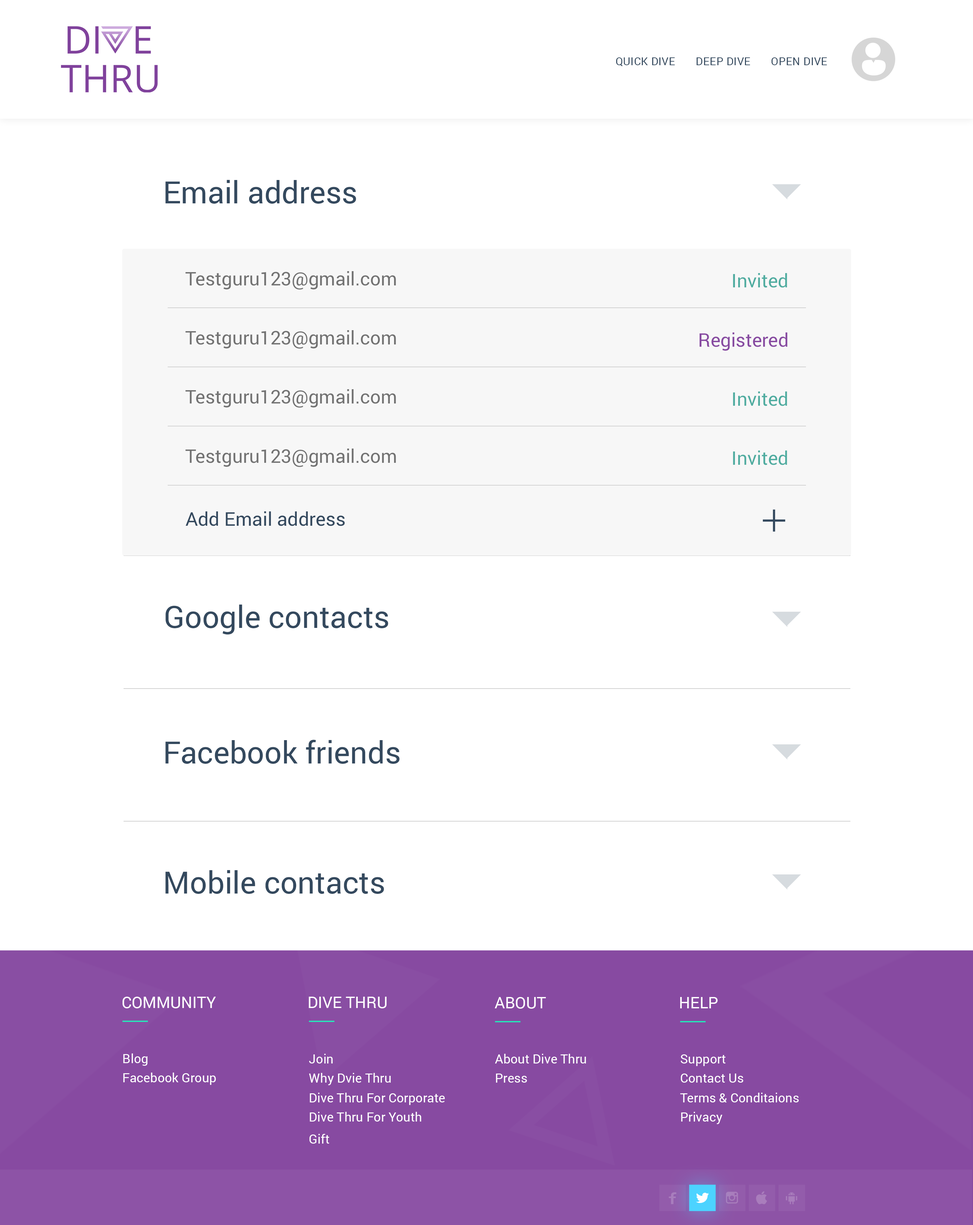
<style>
.page{position:relative;width:973px;height:1225px;background:#ffffff}
.page>*{position:absolute;margin:0}
.t1{font:10.7px "Roboto-Regular";letter-spacing:0.02em;color:#34495e;text-transform:uppercase}
.t2{font:30.7px "Roboto-Regular";color:#34495e}
.t3{font:18.7px "Roboto-Regular";color:#727272}
.t4{font:18.7px "Roboto-Regular";color:#4faca0}
.t5{font:18.7px "Roboto-Regular";color:#874aa1}
.t6{font:18.9px "Roboto-Regular";color:#34495e}
.t7{font:15.9px "Roboto-Regular";color:#ffffff;text-transform:uppercase}
.t8{font:12.7px "Roboto-Regular";color:#ffffff}
</style>
<div class="page">
<p class="t1" style="left:616px;top:57px;width:211px;height:10px">Quick Dive       Deep dive       open Dive</p>
<p class="t2" style="left:165px;top:180px;width:191px;height:24px">Email address</p>
<p class="t3" style="left:186px;top:271px;width:210px;height:19px">Testguru123@gmail.com</p>
<p class="t4" style="left:733px;top:273px;width:54px;height:15px">Invited</p>
<p class="t3" style="left:186px;top:330px;width:210px;height:19px">Testguru123@gmail.com</p>
<p class="t5" style="left:700px;top:333px;width:88px;height:18px">Registered</p>
<p class="t3" style="left:186px;top:389px;width:210px;height:19px">Testguru123@gmail.com</p>
<p class="t4" style="left:733px;top:392px;width:54px;height:14px">Invited</p>
<p class="t3" style="left:186px;top:449px;width:210px;height:18px">Testguru123@gmail.com</p>
<p class="t4" style="left:733px;top:451px;width:54px;height:14px">Invited</p>
<p class="t6" style="left:186px;top:511px;width:159px;height:15px">Add Email address</p>
<p class="t2" style="left:165px;top:605px;width:223px;height:30px">Google contacts</p>
<p class="t2" style="left:165px;top:740px;width:235px;height:24px">Facebook friends</p>
<p class="t2" style="left:165px;top:870px;width:219px;height:24px">Mobile contacts</p>
<p class="t7" style="left:122px;top:997px;width:94px;height:12px">Community</p>
<p class="t7" style="left:309px;top:997px;width:78px;height:12px">Dive thru</p>
<p class="t7" style="left:495px;top:997px;width:51px;height:12px">About</p>
<p class="t7" style="left:680px;top:997px;width:38px;height:12px">Help</p>
<p class="t8" style="left:123px;top:1054px;width:25px;height:12px">Blog</p>
<p class="t8" style="left:309px;top:1054px;width:24px;height:10px">Join</p>
<p class="t8" style="left:495px;top:1054px;width:91px;height:10px">About Dive Thru</p>
<p class="t8" style="left:681px;top:1055px;width:45px;height:11px">Support</p>
<p class="t8" style="left:123px;top:1073px;width:93px;height:12px">Facebook Group</p>
<p class="t8" style="left:309px;top:1073px;width:82px;height:12px">Why Dvie Thru</p>
<p class="t8" style="left:496px;top:1074px;width:31px;height:9px">Press</p>
<p class="t8" style="left:681px;top:1074px;width:63px;height:9px">Contact Us</p>
<p class="t8" style="left:310px;top:1093px;width:135px;height:12px">Dive Thru For Corporate</p>
<p class="t8" style="left:680px;top:1093px;width:119px;height:10px">Terms &amp; Conditaions</p>
<p class="t8" style="left:310px;top:1112px;width:111px;height:10px">Dive Thru For Youth</p>
<p class="t8" style="left:681px;top:1112px;width:41px;height:12px">Privacy</p>
<p class="t8" style="left:309px;top:1134px;width:20px;height:10px">Gift</p>
</div>
